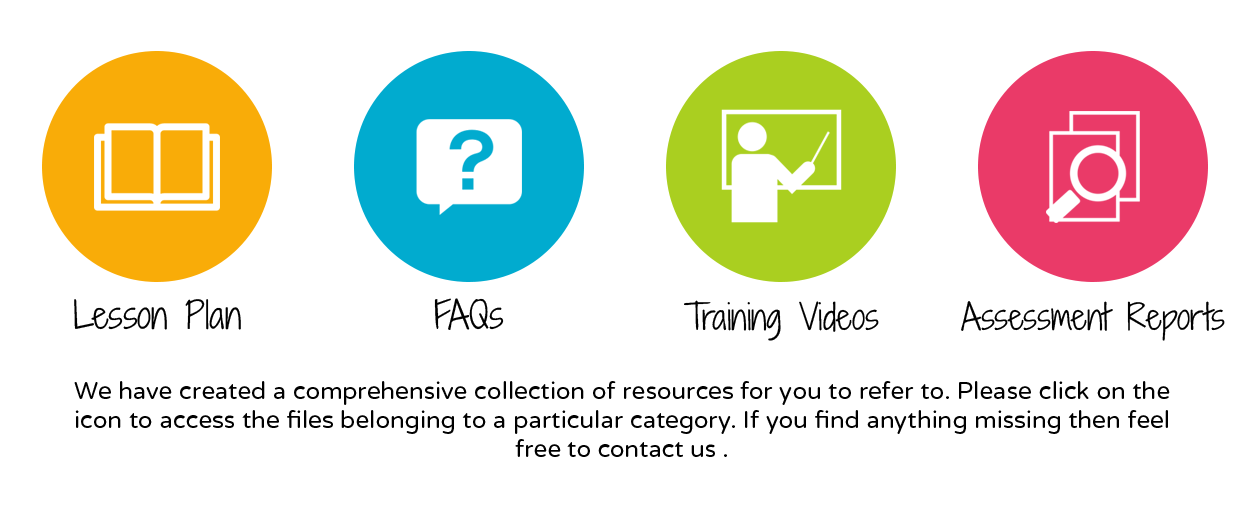
<style>
.page{position:relative;width:1250px;height:516px;background:#ffffff}
.page>*{position:absolute;margin:0}
.t1{font:36px "ShadowsIntoLight";color:#010101}
.t2{font:34px "ShadowsIntoLight";color:#010101}
.t3{font:24px "VarelaRound";color:#000000}
</style>
<div class="page">
<p class="t1" style="left:74px;top:299px;width:167px;height:31px">Lesson Plan</p>
<p class="t1" style="left:434px;top:298px;width:70px;height:32px">FAQs</p>
<p class="t2" style="left:684px;top:300px;width:195px;height:41px">Training Videos</p>
<p class="t2" style="left:961px;top:301px;width:264px;height:40px">Assessment Reports</p>
<p class="t3" style="left:74px;top:381px;width:1096px;height:76px;text-align:justify">We have created a comprehensive collection of resources for you to refer to. Please click on the icon to access the files belonging to a particular category. If you find anything missing then feel free to contact us .</p>
</div>
